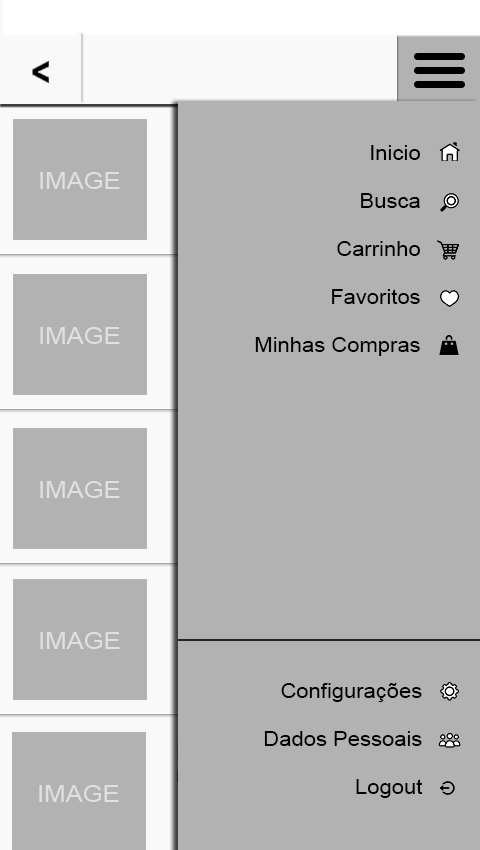
<style>
.page{position:relative;width:480px;height:850px;background:#b2b2b2}
.page>*{position:absolute;margin:0}
.t1{font:20px "ArialMT";color:#000000;scale:1.1 1}
</style>
<div class="page">
<p class="t1" style="left:255px;top:145px;width:165px;height:211px;text-align:right">Inicio<br><br>Busca<br><br>Carrinho<br><br>Favoritos<br><br>Minhas Compras</p>
<p class="t1" style="left:264px;top:683px;width:159px;height:115px;text-align:right">Configurações<br><br>Dados Pessoais<br><br>Logout</p>
</div>
